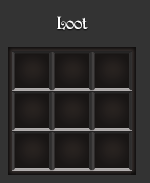
<style>
.page{position:relative;width:150px;height:183px;background:#333333}
.page>*{position:absolute;margin:0}
.t1{font:16px "JMHArkham-Regular";color:#ffffff}
</style>
<div class="page">
<p class="t1" style="left:57px;top:16px;width:31px;height:14px">Loot</p>
</div>
